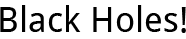
<style>
.page{position:relative;width:186px;height:39px;background:#ffffff}
.page>*{position:absolute;margin:0}
.t1{font:35.3px "DroidSans";color:#000000}
</style>
<div class="page">
<p class="t1" style="left:0px;top:5px;width:186px;height:28px">Black Holes!</p>
</div>
